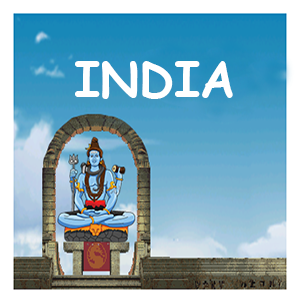
<style>
.page{position:relative;width:300px;height:300px}
.page>*{position:absolute;margin:0}
.t1{font:48px "ComicSansMS-Bold";color:#ffffff}
</style>
<div class="page">
<p class="t1" style="left:75px;top:61px;width:158px;height:38px">INDIA</p>
</div>
